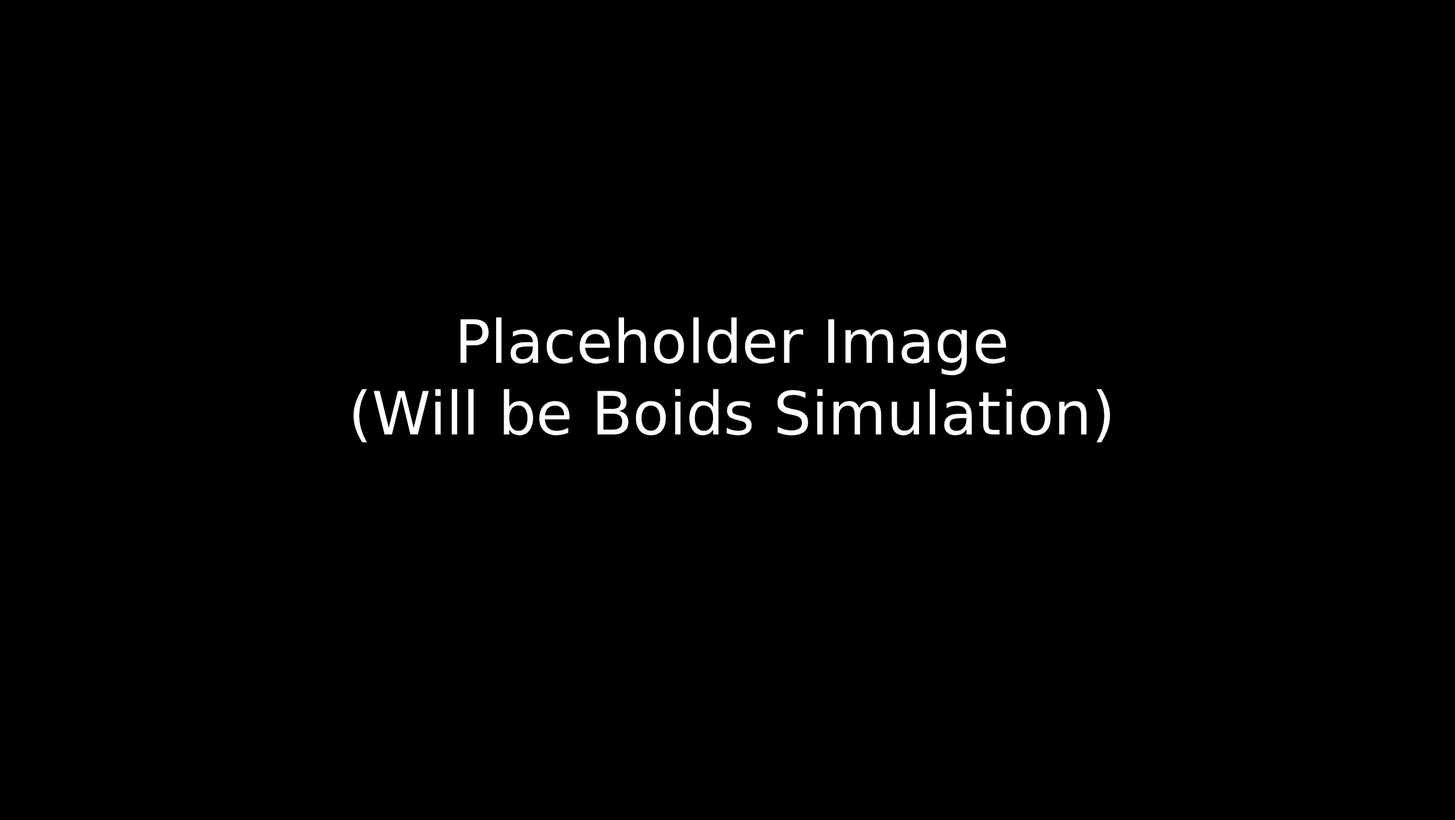
<style>
.page{position:relative;width:1455px;height:820px;background:#000000}
.page>*{position:absolute;margin:0}
.t1{font:59.7px "DejaVuSans";color:#ffffff}
</style>
<div class="page">
<p class="t1" style="left:354px;top:317px;width:756px;height:125px;text-align:center">Placeholder Image<br>(Will be Boids Simulation)</p>
</div>
